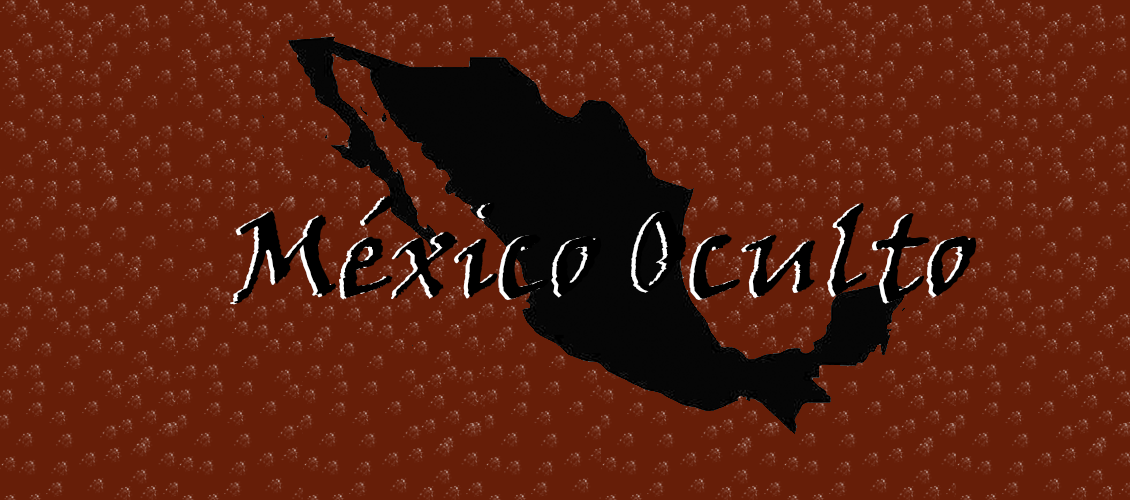
<style>
.page{position:relative;width:1130px;height:500px;background:#661e08}
.page>*{position:absolute;margin:0}
.t1{font:120px "VinerHandITC"}
.t2{font:120px "VinerHandITC";color:#000000}
</style>
<div class="page">
<p class="t1" style="left:230px;top:196px;width:743px;height:109px">México Oculto</p>
<p class="t2" style="left:234px;top:195px;width:743px;height:109px">México Oculto</p>
</div>
